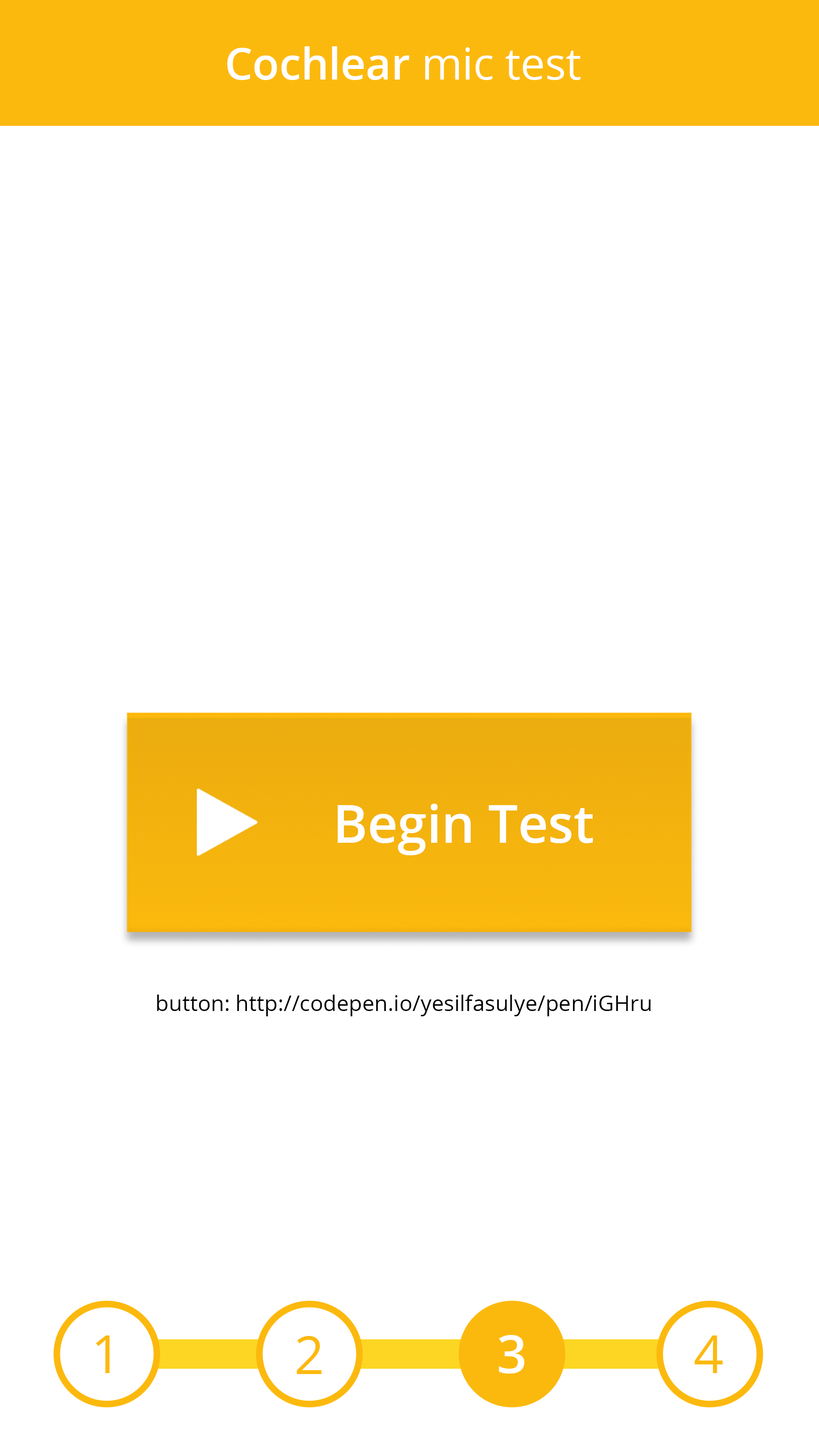
<style>
.page{position:relative;width:819px;height:1456px;background:#ffffff}
.page>*{position:absolute;margin:0}
.t1{font:43.7px "OpenSans-Semibold";color:#ffffff}
.t2{font:43.7px "OpenSans";color:#ffffff}
.t3{font:52.4px "OpenSans-Semibold";color:#ffffff}
.t4{font:21.8px "OpenSans";color:#000000}
.t5{font:52.4px "OpenSans";color:#fcb90d}
</style>
<div class="page">
<p class="t1" style="left:227px;top:46px;width:354px;height:34px">Cochlear <span class="t2">mic test</span></p>
<p class="t3" style="left:338px;top:804px;width:255px;height:51px">Begin Test</p>
<p class="t4" style="left:157px;top:995px;width:494px;height:22px">button: http://codepen.io/yesilfasulye/pen/iGHru</p>
<p class="t5" style="left:95px;top:1336px;width:15px;height:37px">1</p>
<p class="t5" style="left:297px;top:1336px;width:25px;height:38px">2</p>
<p class="t3" style="left:499px;top:1335px;width:25px;height:39px">3</p>
<p class="t5" style="left:694px;top:1336px;width:29px;height:37px">4</p>
</div>
